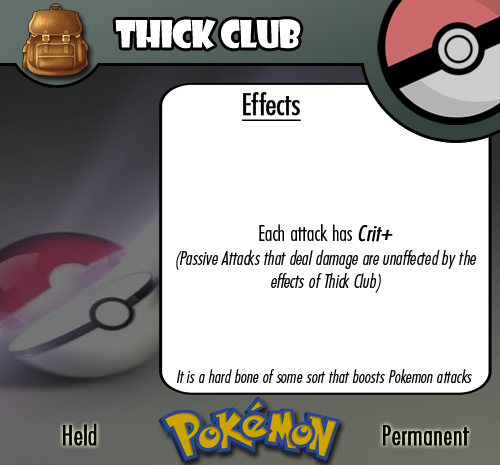
<style>
.page{position:relative;width:500px;height:465px;background:#ffffff}
.page>*{position:absolute;margin:0}
.t1{font:36.7px "ShowcardGothic-Reg";letter-spacing:-0.025em;color:#ffffff;scale:0.91 1}
.t2{font:19.4px "FuturaCondensedBQ-Light";color:#010101;font-style:italic}
.t3{font:27.8px "FuturaCondensedBQ-Light";color:#010101;font-weight:bold}
.t4{font:30.6px "FuturaCondensedBQ-Light";color:#010101;font-weight:bold;text-decoration:underline}
.t5{font:22.2px "FuturaCondensedBQ-Light";color:#010101}
.t6{font:22.2px "FuturaCondensedBQ-Light";color:#010101;font-weight:bold;font-style:italic}
.t7{font:18.1px "FuturaCondensedBQ-Light";color:#010101;font-style:italic}
</style>
<div class="page">
<p class="t1" style="left:115px;top:19px;width:186px;height:30px">Thick Club</p>
<p class="t2" style="left:176px;top:92px;width:300px;height:201px"><span class="t3">  </span><span class="t4">Effects<br><br><br><br></span><span class="t5">Each attack has </span><span class="t6">Crit+<br></span>(Passive Attacks that deal damage are unaffected by the effects of Thick Club)</p>
<p class="t7" style="left:176px;top:369px;width:296px;height:14px">It is a hard bone of some sort that boosts Pokemon attacks</p>
<p class="t3" style="left:63px;top:423px;width:34px;height:23px">Held</p>
<p class="t3" style="left:383px;top:425px;width:86px;height:21px">Permanent</p>
</div>
